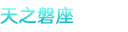
<style>
.page{position:relative;width:128px;height:32px;background:#ffffff}
.page>*{position:absolute;margin:0}
.t1{font:18.7px "HYWenHei-FEW";letter-spacing:0.025em}
</style>
<div class="page">
<p class="t1" style="left:0px;top:6px;width:73px;height:18px">天之磐座</p>
</div>
